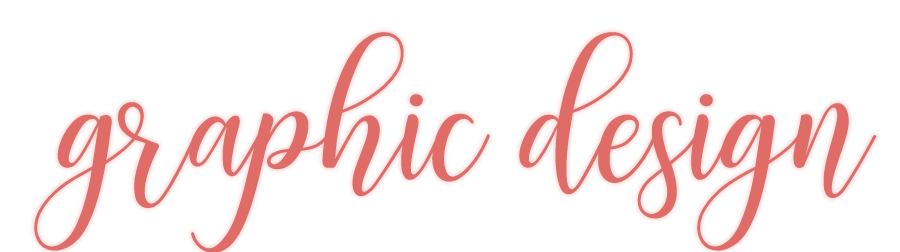
<style>
.page{position:relative;width:900px;height:252px;background:#ffffff}
.page>*{position:absolute;margin:0}
.t1{font:193.3px "leisha";color:#e06c67}
</style>
<div class="page">
<p class="t1" style="left:34px;top:32px;width:843px;height:221px">graphic design</p>
</div>
